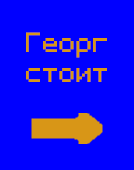
<style>
.page{position:relative;width:134px;height:170px;background:#0000ff}
.page>*{position:absolute;margin:0}
.t1{font:25px "PixeloidSans";letter-spacing:0.005em;color:#d89617}
</style>
<div class="page">
<p class="t1" style="left:26px;top:32px;width:81px;height:50px;text-align:center">Георг<br>стоит</p>
</div>
